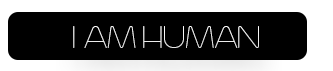
<style>
.page{position:relative;width:333px;height:71px;background:#000000}
.page>*{position:absolute;margin:0}
.t1{font:39.3px "Trench-Thin";letter-spacing:-0.05em;color:#000000;text-transform:uppercase}
</style>
<div class="page">
<p class="t1" style="left:73px;top:26px;width:186px;height:22px">I am HUMAN</p>
</div>
